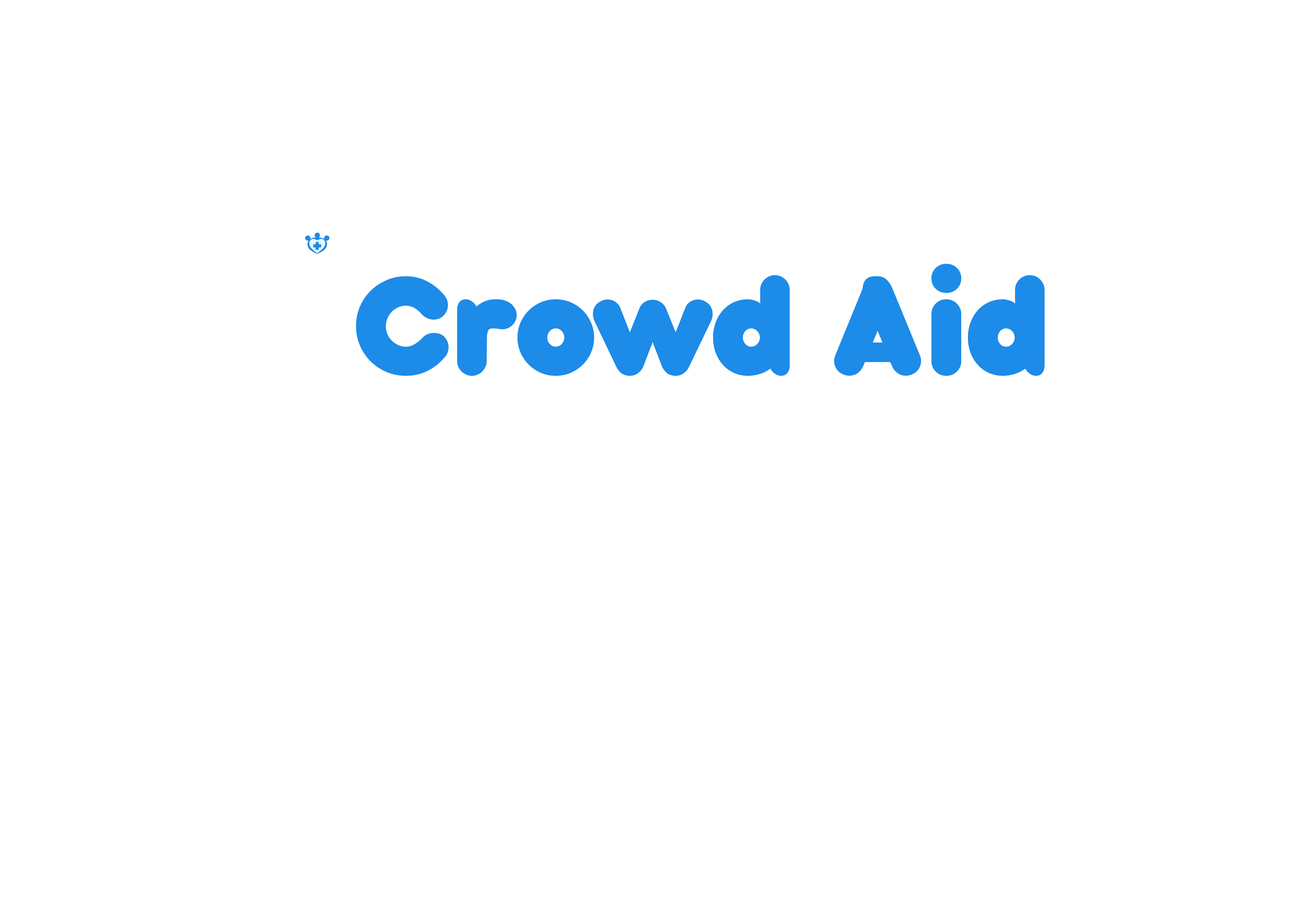
<style>
.page{position:relative;width:1316px;height:906px;background:#ffffff}
.page>*{position:absolute;margin:0}
.t1{font:158px "bubbleboddy";color:#1d8be8}
</style>
<div class="page">
<p class="t1" style="left:356px;top:264px;width:688px;height:112px">Crowd Aid</p>
</div>
